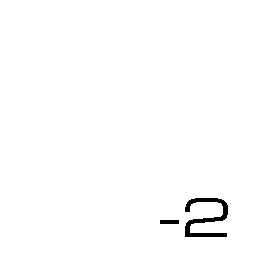
<style>
.page{position:relative;width:256px;height:256px;background:#ffffff}
.page>*{position:absolute;margin:0}
.t1{font:50.9px "Michroma";color:#000000}
</style>
<div class="page">
<p class="t1" style="left:160px;top:198px;width:68px;height:39px">-2</p>
</div>
